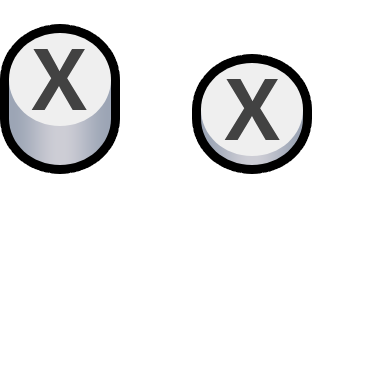
<style>
.page{position:relative;width:384px;height:384px;background:#ffffff}
.page>*{position:absolute;margin:0}
.t1{font:87px "FreeSet-Bold";letter-spacing:0.004em;color:#424242;scale:0.96 1}
</style>
<div class="page">
<p class="t1" style="left:31px;top:49px;width:56px;height:61px">X</p>
<p class="t1" style="left:224px;top:79px;width:56px;height:61px">X</p>
</div>
